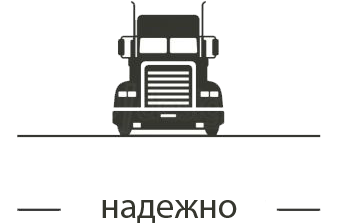
<style>
.page{position:relative;width:338px;height:223px;background:#ffffff}
.page>*{position:absolute;margin:0}
.t1{font:36px "MyriadPro-Regular";color:#35362e}
</style>
<div class="page">
<p class="t1" style="left:102px;top:200px;width:135px;height:23px">надежно</p>
</div>
